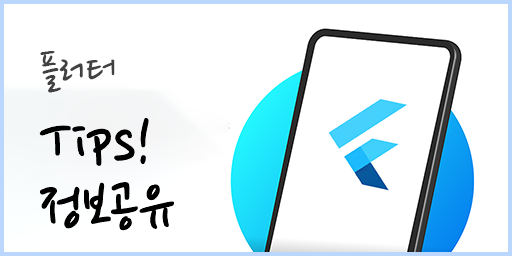
<style>
.page{position:relative;width:512px;height:256px;background:#ffffff}
.page>*{position:absolute;margin:0}
.t1{font:44.8px "NanumPen";color:#414141}
.t2{font:66.4px/64px "NanumPen";color:#000000}
</style>
<div class="page">
<p class="t1" style="left:40px;top:51px;width:75px;height:42px">플러터</p>
<p class="t2" style="left:39px;top:118px;width:136px;height:113px">Tips!<br>정보공유</p>
</div>
